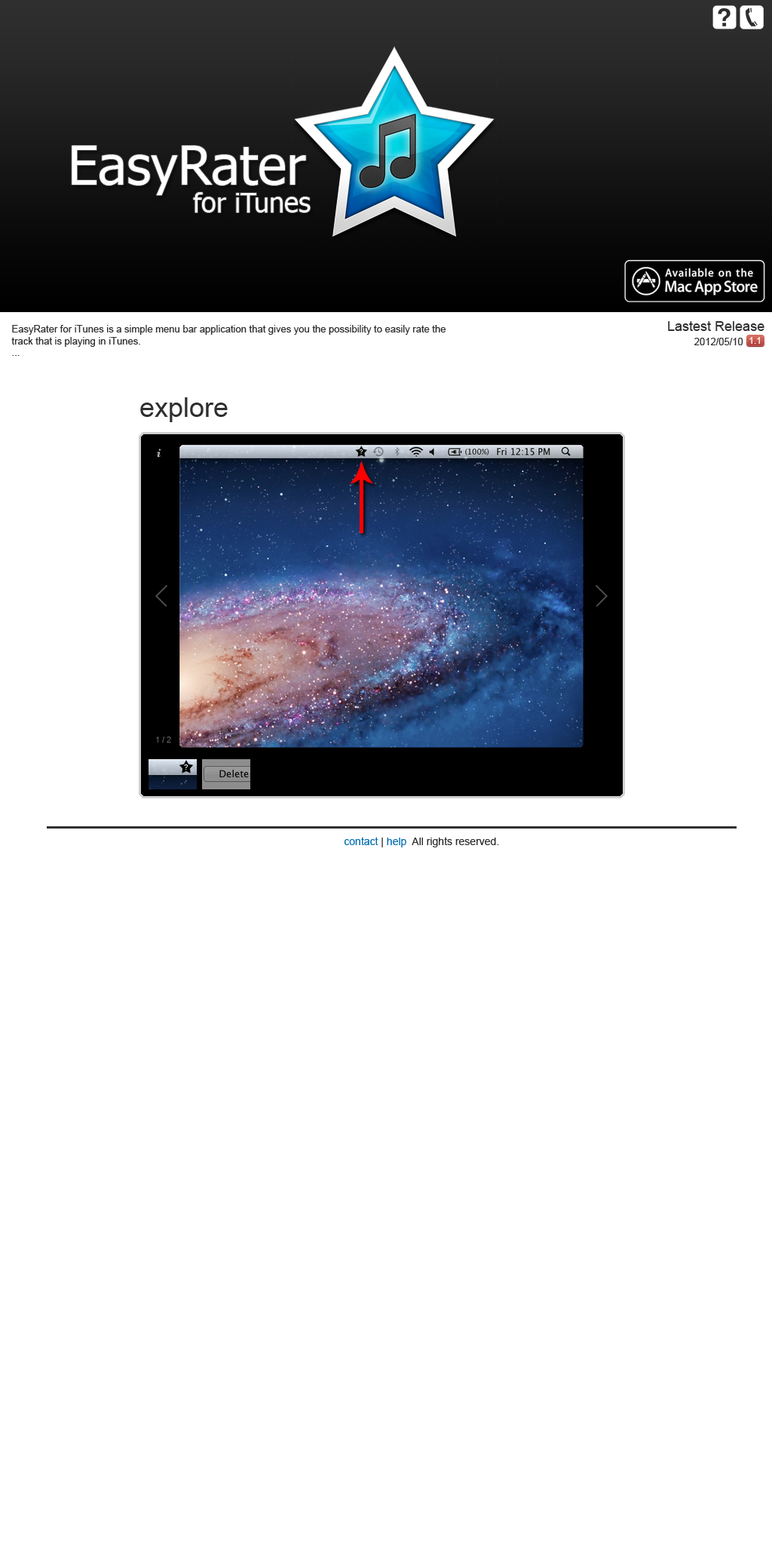
<style>
.page{position:relative;width:772px;height:1544px;background:#ffffff}
.page>*{position:absolute;margin:0}
.t1{font:54.3px "Tahoma";color:#ffffff}
.t2{font:27.1px "Tahoma";color:#ffffff}
.t3{font:9.8px "ArialMT";color:#2f2f2f}
.t4{font:13.6px "ArialMT";color:#2f2f2f}
.t5{font:9px "ArialMT";color:#ffffff}
.t6{font:27.1px "ArialMT";color:#2f2f2f}
.t7{font:10.6px "ArialMT";color:#2f2f2f}
.t8{font:10.6px "ArialMT";color:#0870b3}
</style>
<div class="page">
<p class="t1" style="left:72px;top:146px;width:234px;height:49px">EasyRater</p>
<p class="t2" style="left:193px;top:192px;width:118px;height:21px">for iTunes</p>
<p class="t3" style="left:11px;top:325px;width:435px;height:31px">EasyRater for iTunes is a simple menu bar application that gives you the possibility to easily rate the <br>track that is playing in iTunes.<br>...</p>
<p class="t4" style="left:668px;top:321px;width:97px;height:10px">Lastest Release</p>
<p class="t3" style="left:694px;top:338px;width:49px;height:7px">2012/05/10</p>
<p class="t5" style="left:750px;top:337px;width:10px;height:7px">1.1</p>
<p class="t6" style="left:140px;top:397px;width:88px;height:25px">explore</p>
<p class="t7" style="left:344px;top:837px;width:155px;height:11px"><span class="t8">contact </span>| <span class="t8">help  </span>All rights reserved.</p>
</div>
